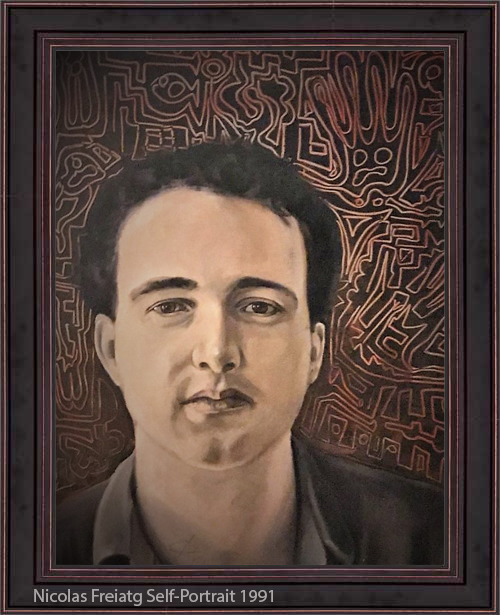
<style>
.page{position:relative;width:500px;height:615px}
.page>*{position:absolute;margin:0}
.t1{font:18px "MyriadPro-Regular";color:#aca7a7}
</style>
<div class="page">
<p class="t1" style="left:34px;top:589px;width:239px;height:17px">Nicolas Freiatg Self-Portrait 1991</p>
</div>
